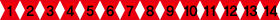
<style>
.page{position:relative;width:280px;height:20px;background:#e60012}
.page>*{position:absolute;margin:0}
.t1{font:14px "YDIYGO360";letter-spacing:-0.1em;color:#000000}
</style>
<div class="page">
<p class="t1" style="left:7px;top:5px;width:5px;height:12px">1</p>
<p class="t1" style="left:26px;top:5px;width:8px;height:11px">2</p>
<p class="t1" style="left:46px;top:5px;width:8px;height:12px">3</p>
<p class="t1" style="left:66px;top:5px;width:8px;height:12px">4</p>
<p class="t1" style="left:86px;top:5px;width:8px;height:12px">5</p>
<p class="t1" style="left:106px;top:5px;width:8px;height:12px">6</p>
<p class="t1" style="left:126px;top:5px;width:8px;height:12px">7</p>
<p class="t1" style="left:146px;top:5px;width:8px;height:12px">8</p>
<p class="t1" style="left:166px;top:5px;width:8px;height:12px">9</p>
<p class="t1" style="left:184px;top:5px;width:14px;height:12px">10</p>
<p class="t1" style="left:204px;top:5px;width:11px;height:12px">11</p>
<p class="t1" style="left:224px;top:5px;width:13px;height:12px">12</p>
<p class="t1" style="left:244px;top:5px;width:13px;height:12px">13</p>
<p class="t1" style="left:264px;top:5px;width:14px;height:12px">14</p>
</div>
